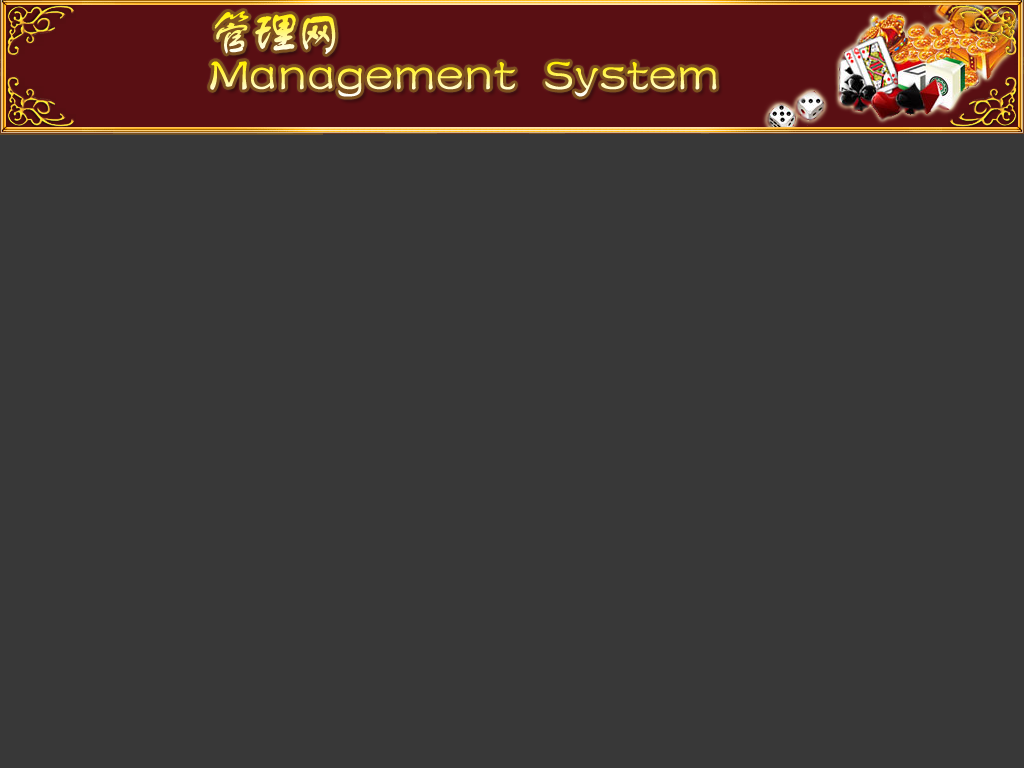
<style>
.page{position:relative;width:1024px;height:768px;background:#383838}
.page>*{position:absolute;margin:0}
.t1{font:50px "FZSTK--GBK1-0";letter-spacing:-0.14em;font-weight:bold}
.t2{font:50px "FZSTK--GBK1-0";font-weight:bold}
</style>
<div class="page">
<p class="t1" style="left:214px;top:11px;width:122px;height:43px">管理网</p>
<p class="t2" style="left:210px;top:61px;width:507px;height:36px">Management  System</p>
</div>
